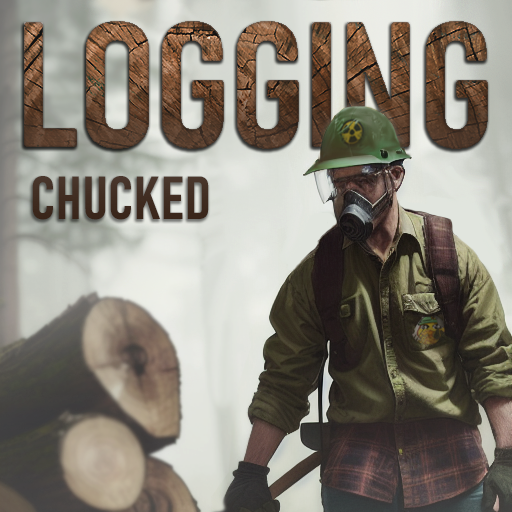
<style>
.page{position:relative;width:512px;height:512px}
.page>*{position:absolute;margin:0}
.t1{font:60px "Bahnschrift-SemiBoldCondensed";letter-spacing:0.025em;font-weight:bold}
.t2{font:175px "Bahnschrift-SemiBoldCondensed";letter-spacing:0.005em;font-weight:bold}
.t3{font:175px "Bahnschrift-SemiBoldCondensed";letter-spacing:0.025em;font-weight:bold}
</style>
<div class="page">
<p class="t1" style="left:24px;top:21px;width:464px;height:199px"><span class="t2">LOGGIN</span><span class="t3">G<br></span> CHUCKED</p>
</div>
